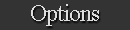
<style>
.page{position:relative;width:130px;height:30px;background:#333333}
.page>*{position:absolute;margin:0}
.t1{font:24px "TimesNewRomanPSMT";letter-spacing:-0.04em;color:#dddddd}
</style>
<div class="page">
<p class="t1" style="left:31px;top:4px;width:68px;height:22px">Options</p>
</div>
